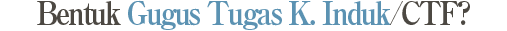
<style>
.page{position:relative;width:507px;height:31px;background:#ffffff}
.page>*{position:absolute;margin:0}
.t1{font:32px "RyuminPro-ExBold";letter-spacing:-0.08em;color:#5b92b2;scale:0.9 1}
.t2{font:32px "RyuminPro-ExBold";letter-spacing:-0.08em;color:#4c4842;scale:0.9 1}
</style>
<div class="page">
<p class="t1" style="left:37px;top:0px;width:433px;height:30px"><span class="t2">Bentuk </span>Gugus Tugas K. Induk<span class="t2">/CTF?</span></p>
</div>
